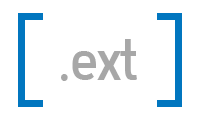
<style>
.page{position:relative;width:200px;height:120px;background:#ffffff}
.page>*{position:absolute;margin:0}
.t1{font:72.2px "NoyhGeometricSlim-Regular";letter-spacing:-0.04em;color:#a7a7a7}
</style>
<div class="page">
<p class="t1" style="left:61px;top:39px;width:76px;height:42px">.ext</p>
</div>
